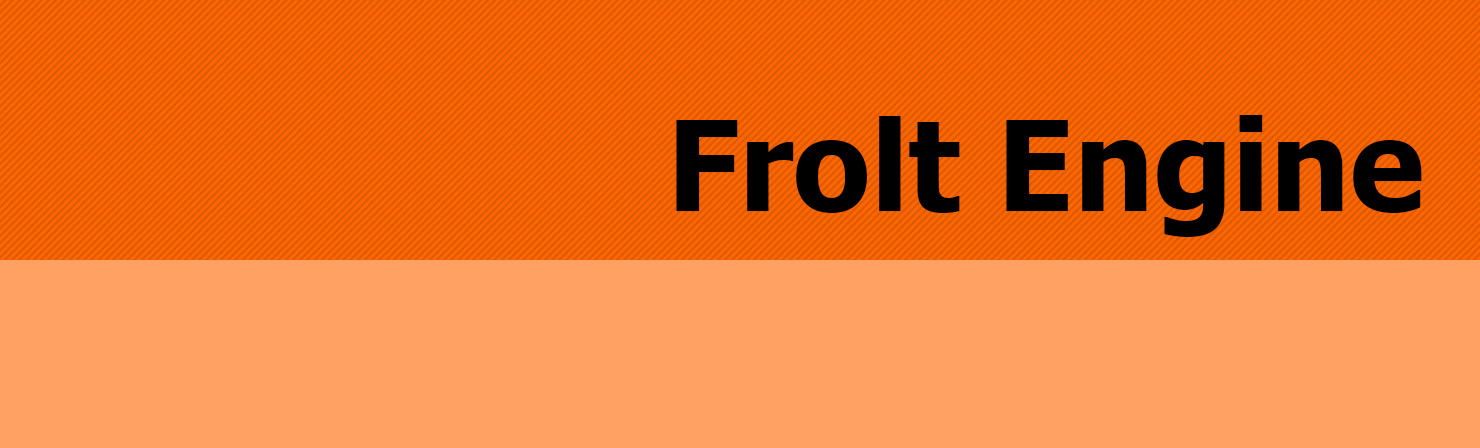
<style>
.page{position:relative;width:1480px;height:448px;background:#fea163}
.page>*{position:absolute;margin:0}
.t1{font:125px "Tahoma-Bold";color:#000000}
</style>
<div class="page">
<p class="t1" style="left:676px;top:115px;width:746px;height:122px">Frolt Engine</p>
</div>
